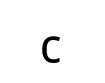
<style>
.page{position:relative;width:105px;height:83px;background:#ffffff}
.page>*{position:absolute;margin:0}
.t1{font:47.9px "DroidSans";color:#000000}
</style>
<div class="page">
<p class="t1" style="left:42px;top:36px;width:18px;height:27px">c</p>
</div>
